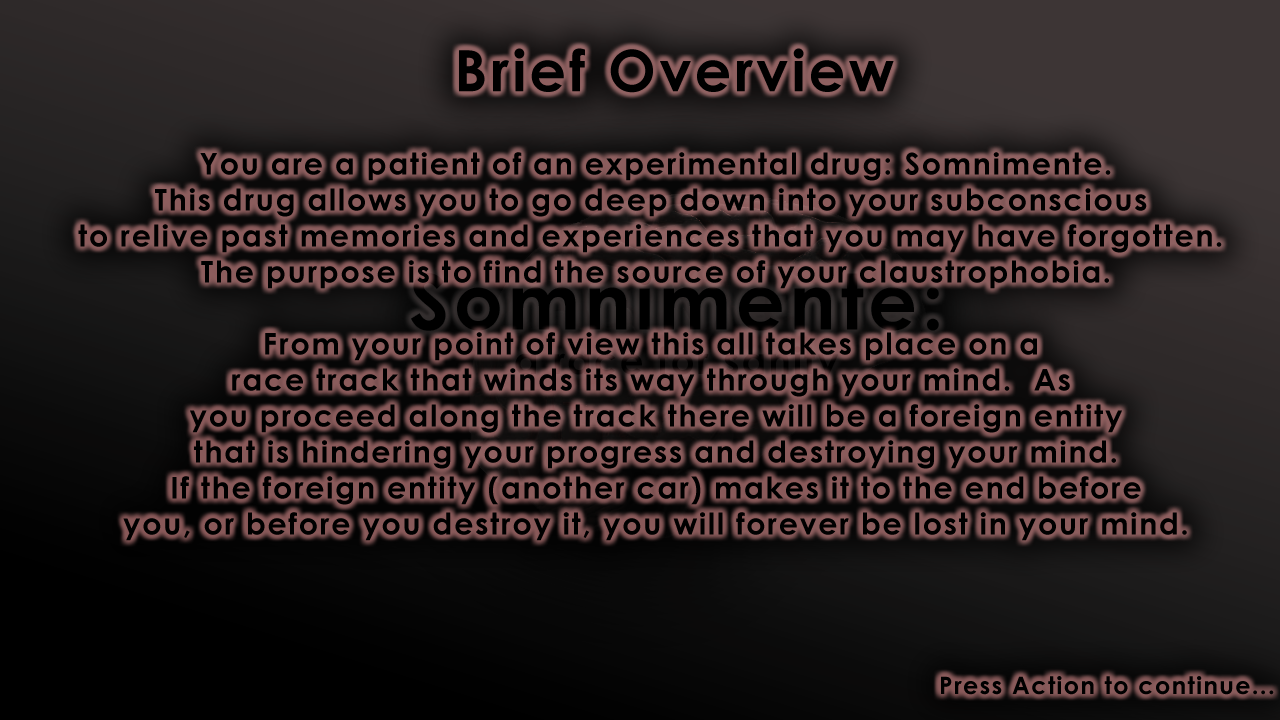
<style>
.page{position:relative;width:1280px;height:720px}
.page>*{position:absolute;margin:0}
.t1{font:57px "CenturyGothic-Bold";letter-spacing:0.06em;color:#000000}
.t2{font:30px "CenturyGothic-Bold";letter-spacing:0.06em;color:#000000}
.t3{font:37px "CenturyGothic-Bold";letter-spacing:0.06em;color:#000000}
.t4{font:77px "CenturyGothic-Bold";letter-spacing:0.06em;color:#000000}
.t5{font:24px "CenturyGothic-Bold";letter-spacing:0.06em;color:#000000}
</style>
<div class="page">
<p class="t1" style="left:459px;top:48px;width:435px;height:45px">Brief Overview</p>
<p class="t2" style="left:78px;top:152px;width:1144px;height:389px;text-align:center">You are a patient of an experimental drug: Somnimente.<br>This drug allows you to go deep down into your subconscious <br>to relive past memories and experiences that you may have forgotten. <br> The purpose is to find the source of your claustrophobia. <br><br>From your point of view this all takes place on a <br>race track that winds its way through your mind.  As <br>you proceed along the track there will be a foreign entity<br>that is hindering your progress and destroying your mind.<br>If the foreign entity (another car) makes it to the end before<br>you, or before you destroy it, you will forever be lost in your mind.</p>
<p class="t3" style="left:411px;top:271px;width:528px;height:111px;text-align:center"><span class="t4">Somnimente:<br></span>a race for sanity</p>
<p class="t5" style="left:941px;top:676px;width:333px;height:19px">Press Action to continue...</p>
</div>
